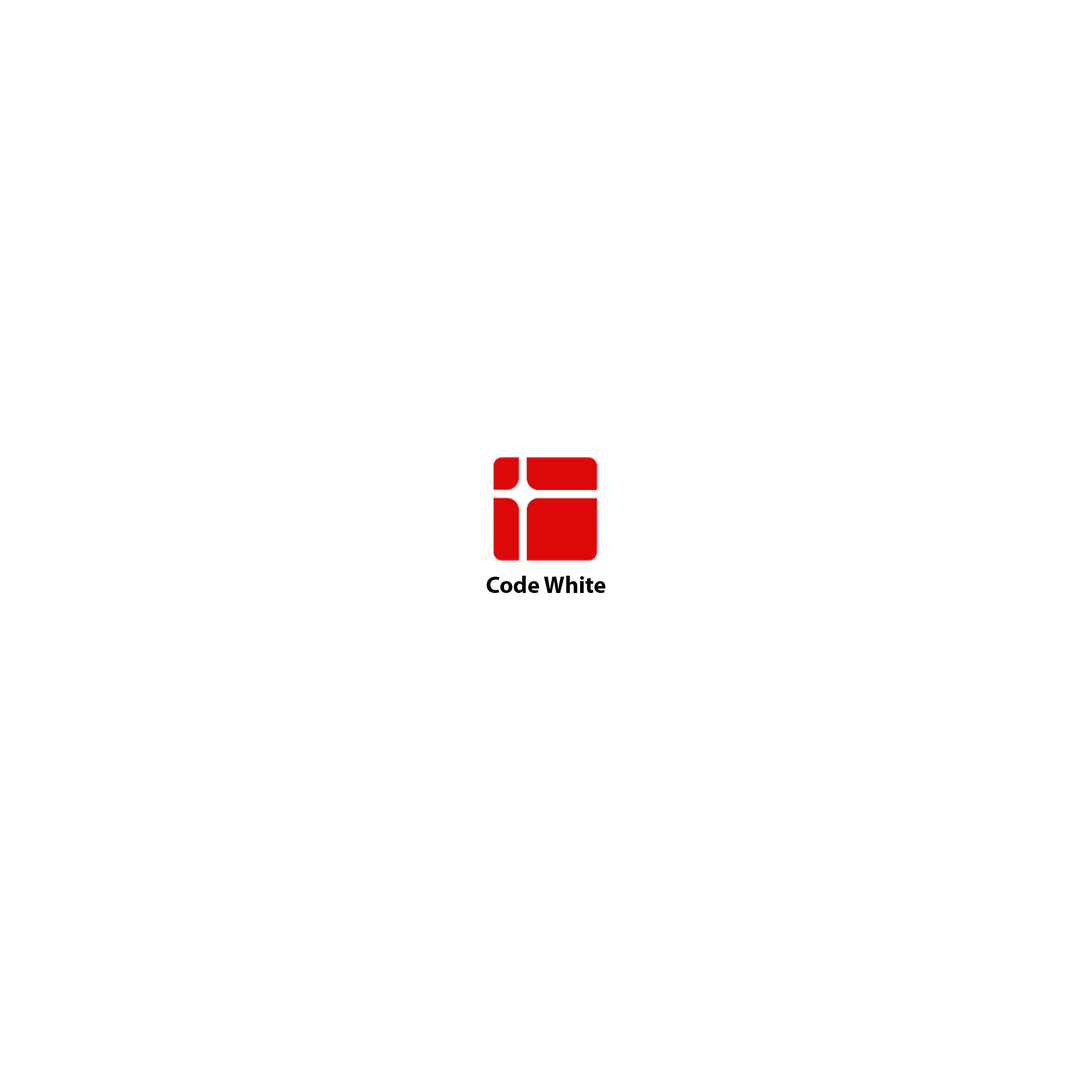
<style>
.page{position:relative;width:1092px;height:1092px;background:#ffffff}
.page>*{position:absolute;margin:0}
.t1{font:23.7px "MyriadPro-Bold";color:#000000}
</style>
<div class="page">
<p class="t1" style="left:487px;top:576px;width:118px;height:17px">Code White</p>
</div>
